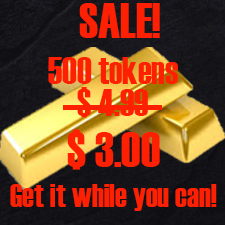
<style>
.page{position:relative;width:225px;height:225px}
.page>*{position:absolute;margin:0}
.t1{font:50px "Haettenschweiler";color:#fd2003}
.t2{font:37.5px "Haettenschweiler";color:#fd2003}
.t3{font:33.3px "Haettenschweiler";color:#fd2003}
</style>
<div class="page">
<p class="t1" style="left:79px;top:3px;width:81px;height:35px">SALE!</p>
<p class="t2" style="left:48px;top:57px;width:130px;height:27px">500 tokens</p>
<p class="t2" style="left:77px;top:87px;width:71px;height:31px">$ 4.99</p>
<p class="t1" style="left:67px;top:129px;width:93px;height:41px">$ 3.00</p>
<p class="t3" style="left:10px;top:184px;width:207px;height:27px">Get it while you can!</p>
</div>
